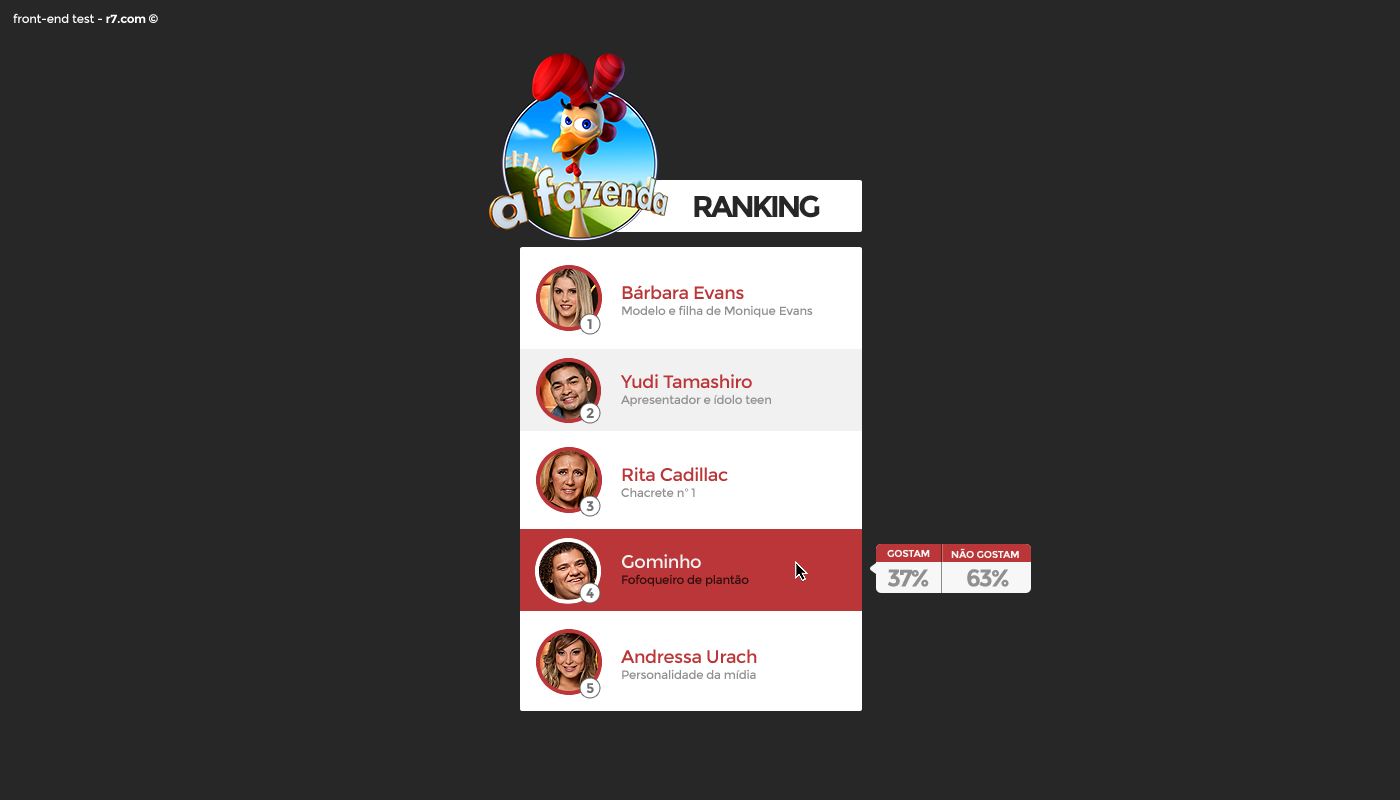
<style>
.page{position:relative;width:1400px;height:800px;background:#272727}
.page>*{position:absolute;margin:0}
.t1{font:12px "Montserrat-Regular";letter-spacing:-0.025em;color:#ffffff}
.t2{font:12px "Montserrat-Bold";letter-spacing:-0.025em;color:#ffffff}
.t3{font:30px "Montserrat-Bold";letter-spacing:-0.1em;color:#272727}
.t4{font:18px "Montserrat-Regular";letter-spacing:-0.025em;color:#ba3638}
.t5{font:12px "Montserrat-Regular";letter-spacing:-0.025em;color:#909090}
.t6{font:14px "Montserrat-Bold";letter-spacing:-0.1em;color:#707070}
.t7{font:18px "Montserrat-Regular";letter-spacing:-0.025em;color:#f2f1f1}
.t8{font:10px "Montserrat-Bold";letter-spacing:-0.025em;color:#f8f7f7}
.t9{font:24px "Montserrat-Bold";letter-spacing:-0.1em;color:#909090}
.t10{font:12px "Montserrat-Regular";letter-spacing:-0.025em;color:#330d0e}
</style>
<div class="page">
<p class="t1" style="left:13px;top:13px;width:145px;height:10px">front-end test - <span class="t2">r7.com ©</span></p>
<p class="t3" style="left:694px;top:195px;width:126px;height:23px">RANKING</p>
<p class="t4" style="left:622px;top:285px;width:122px;height:15px">Bárbara Evans</p>
<p class="t5" style="left:622px;top:305px;width:191px;height:13px">Modelo e filha de Monique Evans</p>
<p class="t6" style="left:587px;top:319px;width:5px;height:10px">1</p>
<p class="t4" style="left:621px;top:374px;width:131px;height:15px">Yudi Tamashiro</p>
<p class="t5" style="left:621px;top:395px;width:150px;height:12px">Apresentador e ídolo teen</p>
<p class="t6" style="left:586px;top:408px;width:8px;height:10px">2</p>
<p class="t4" style="left:622px;top:467px;width:106px;height:15px">Rita Cadillac</p>
<p class="t5" style="left:621px;top:488px;width:74px;height:9px">Chacrete nº 1</p>
<p class="t6" style="left:586px;top:501px;width:8px;height:10px">3</p>
<p class="t7" style="left:622px;top:554px;width:79px;height:15px">Gominho</p>
<p class="t7" style="left:622px;top:554px;width:79px;height:15px">Gominho</p>
<p class="t8" style="left:887px;top:549px;width:43px;height:8px">GOSTAM</p>
<p class="t8" style="left:951px;top:548px;width:68px;height:10px">NÃO GOSTAM</p>
<p class="t9" style="left:887px;top:569px;width:42px;height:18px">37%</p>
<p class="t9" style="left:967px;top:569px;width:42px;height:18px">63%</p>
<p class="t10" style="left:622px;top:574px;width:127px;height:13px">Fofoqueiro de plantão</p>
<p class="t10" style="left:622px;top:574px;width:127px;height:13px">Fofoqueiro de plantão</p>
<p class="t6" style="left:586px;top:588px;width:8px;height:10px">4</p>
<p class="t6" style="left:586px;top:588px;width:8px;height:10px">4</p>
<p class="t4" style="left:621px;top:649px;width:136px;height:15px">Andressa Urach</p>
<p class="t5" style="left:622px;top:669px;width:134px;height:10px">Personalidade da mídia</p>
<p class="t6" style="left:586px;top:683px;width:8px;height:10px">5</p>
</div>
